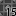
<style>
.page{position:relative;width:16px;height:16px}
.page>*{position:absolute;margin:0}
.t1{font:11px "MyriadPro-Regular";color:#000000}
</style>
<div class="page">
<p class="t1" style="left:6px;top:8px;width:11px;height:8px">15</p>
</div>
